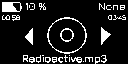
<style>
.page{position:relative;width:128px;height:64px;background:#000000}
.page>*{position:absolute;margin:0}
.t1{font:11px "Jura-Regular";color:#ffffff}
.t2{font:7.2px "Jura-Regular";color:#ffffff}
</style>
<div class="page">
<p class="t1" style="left:25px;top:2px;width:22px;height:9px">10 %</p>
<p class="t1" style="left:98px;top:2px;width:27px;height:8px">None</p>
<p class="t2" style="left:1px;top:15px;width:19px;height:6px">00:56</p>
<p class="t2" style="left:108px;top:15px;width:18px;height:6px">03:45</p>
<p class="t1" style="left:23px;top:54px;width:84px;height:11px">Radioactive.mp3</p>
</div>
